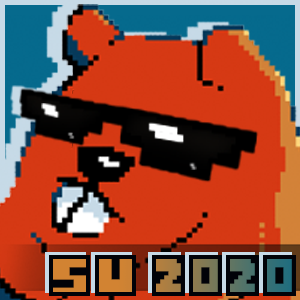
<style>
.page{position:relative;width:300px;height:300px}
.page>*{position:absolute;margin:0}
.t1{font:65.7px "PixelCards";color:#010208}
</style>
<div class="page">
<p class="t1" style="left:49px;top:255px;width:247px;height:41px">SU 2020</p>
</div>
